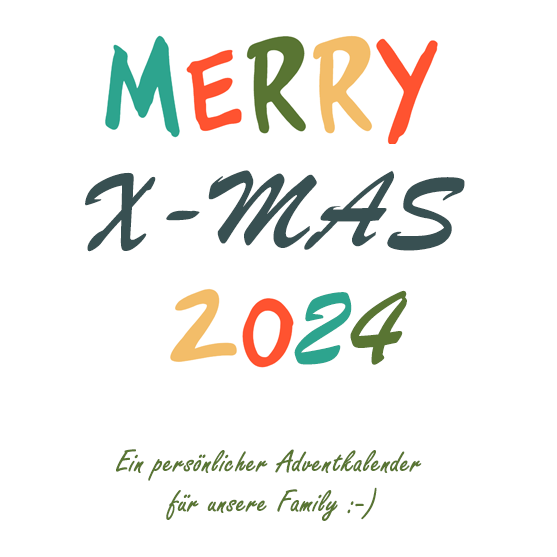
<style>
.page{position:relative;width:557px;height:557px;background:#ffffff}
.page>*{position:absolute;margin:0}
.t1{font:113.3px "BrushScriptMT";color:#385052;font-weight:bold}
.t2{font:116.7px "BrushScriptMT";color:#2da48e;font-weight:bold}
.t3{font:116.7px "BrushScriptMT";color:#597533;font-weight:bold}
.t4{font:33.3px "FreestyleScript-Regular";color:#597533;font-weight:bold}
</style>
<div class="page">
<p class="t1" style="left:85px;top:170px;width:380px;height:82px">X-MAS</p>
<p class="t2" style="left:294px;top:292px;width:58px;height:73px">2</p>
<p class="t3" style="left:350px;top:290px;width:57px;height:75px">4</p>
<p class="t4" style="left:116px;top:449px;width:306px;height:72px;text-align:center">Ein persönlicher Adventkalender <br>für unsere Family :-)</p>
</div>
